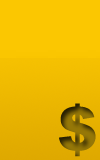
<style>
.page{position:relative;width:100px;height:160px;background:#fbc701}
.page>*{position:absolute;margin:0}
.t1{font:60px "Arial-Black";letter-spacing:0.05em}
</style>
<div class="page">
<p class="t1" style="left:59px;top:103px;width:37px;height:54px">$</p>
</div>
